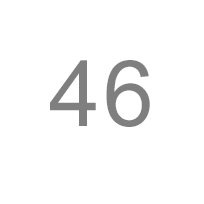
<style>
.page{position:relative;width:204px;height:204px;background:#ffffff}
.page>*{position:absolute;margin:0}
.t1{font:91.7px "ArialMT";letter-spacing:0.025em;color:#7f7f7f}
</style>
<div class="page">
<p class="t1" style="left:50px;top:60px;width:100px;height:67px">46</p>
</div>
